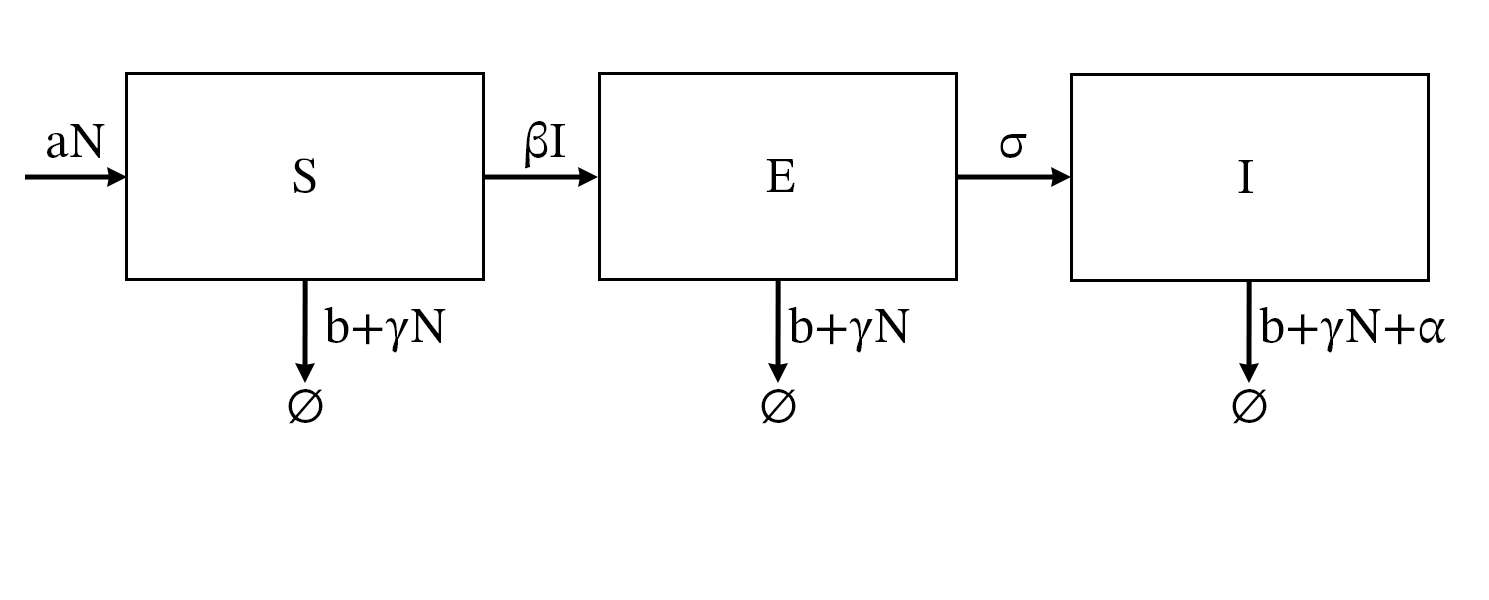
<style>
.page{position:relative;width:1489px;height:600px;background:#ffffff}
.page>*{position:absolute;margin:0}
.t1{font:50px "STIXTwoMath";color:#000000}
</style>
<div class="page">
<p class="t1" style="left:47px;top:124px;width:58px;height:34px">aN</p>
<p class="t1" style="left:525px;top:121px;width:40px;height:48px">βI</p>
<p class="t1" style="left:1000px;top:134px;width:27px;height:24px">σ</p>
<p class="t1" style="left:293px;top:158px;width:23px;height:35px">S</p>
<p class="t1" style="left:766px;top:159px;width:29px;height:33px">E</p>
<p class="t1" style="left:1238px;top:160px;width:15px;height:33px">I</p>
<p class="t1" style="left:324px;top:307px;width:122px;height:46px">b+γN</p>
<p class="t1" style="left:788px;top:307px;width:122px;height:46px">b+γN</p>
<p class="t1" style="left:1259px;top:307px;width:187px;height:46px">b+γN+α</p>
<p class="t1" style="left:288px;top:389px;width:35px;height:35px">∅</p>
<p class="t1" style="left:761px;top:389px;width:35px;height:35px">∅</p>
<p class="t1" style="left:1232px;top:389px;width:35px;height:35px">∅</p>
</div>
